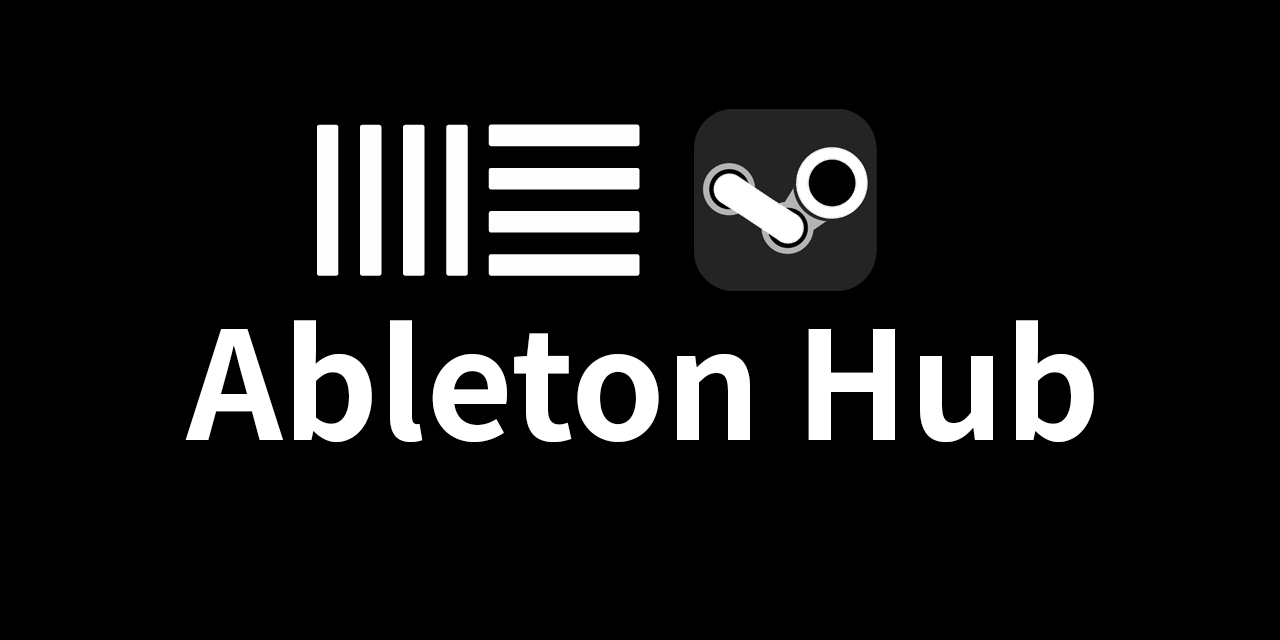
<style>
.page{position:relative;width:1280px;height:640px;background:#000000}
.page>*{position:absolute;margin:0}
.t1{font:150px "NotoSansCJKjp-Bold";color:#ffffff}
</style>
<div class="page">
<p class="t1" style="left:185px;top:320px;width:909px;height:123px">Ableton Hub</p>
</div>
